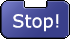
<style>
.page{position:relative;width:70px;height:39px}
.page>*{position:absolute;margin:0}
.t1{font:18px "Verdana";color:#ffffff}
</style>
<div class="page">
<p class="t1" style="left:13px;top:14px;width:46px;height:18px">Stop!</p>
</div>
